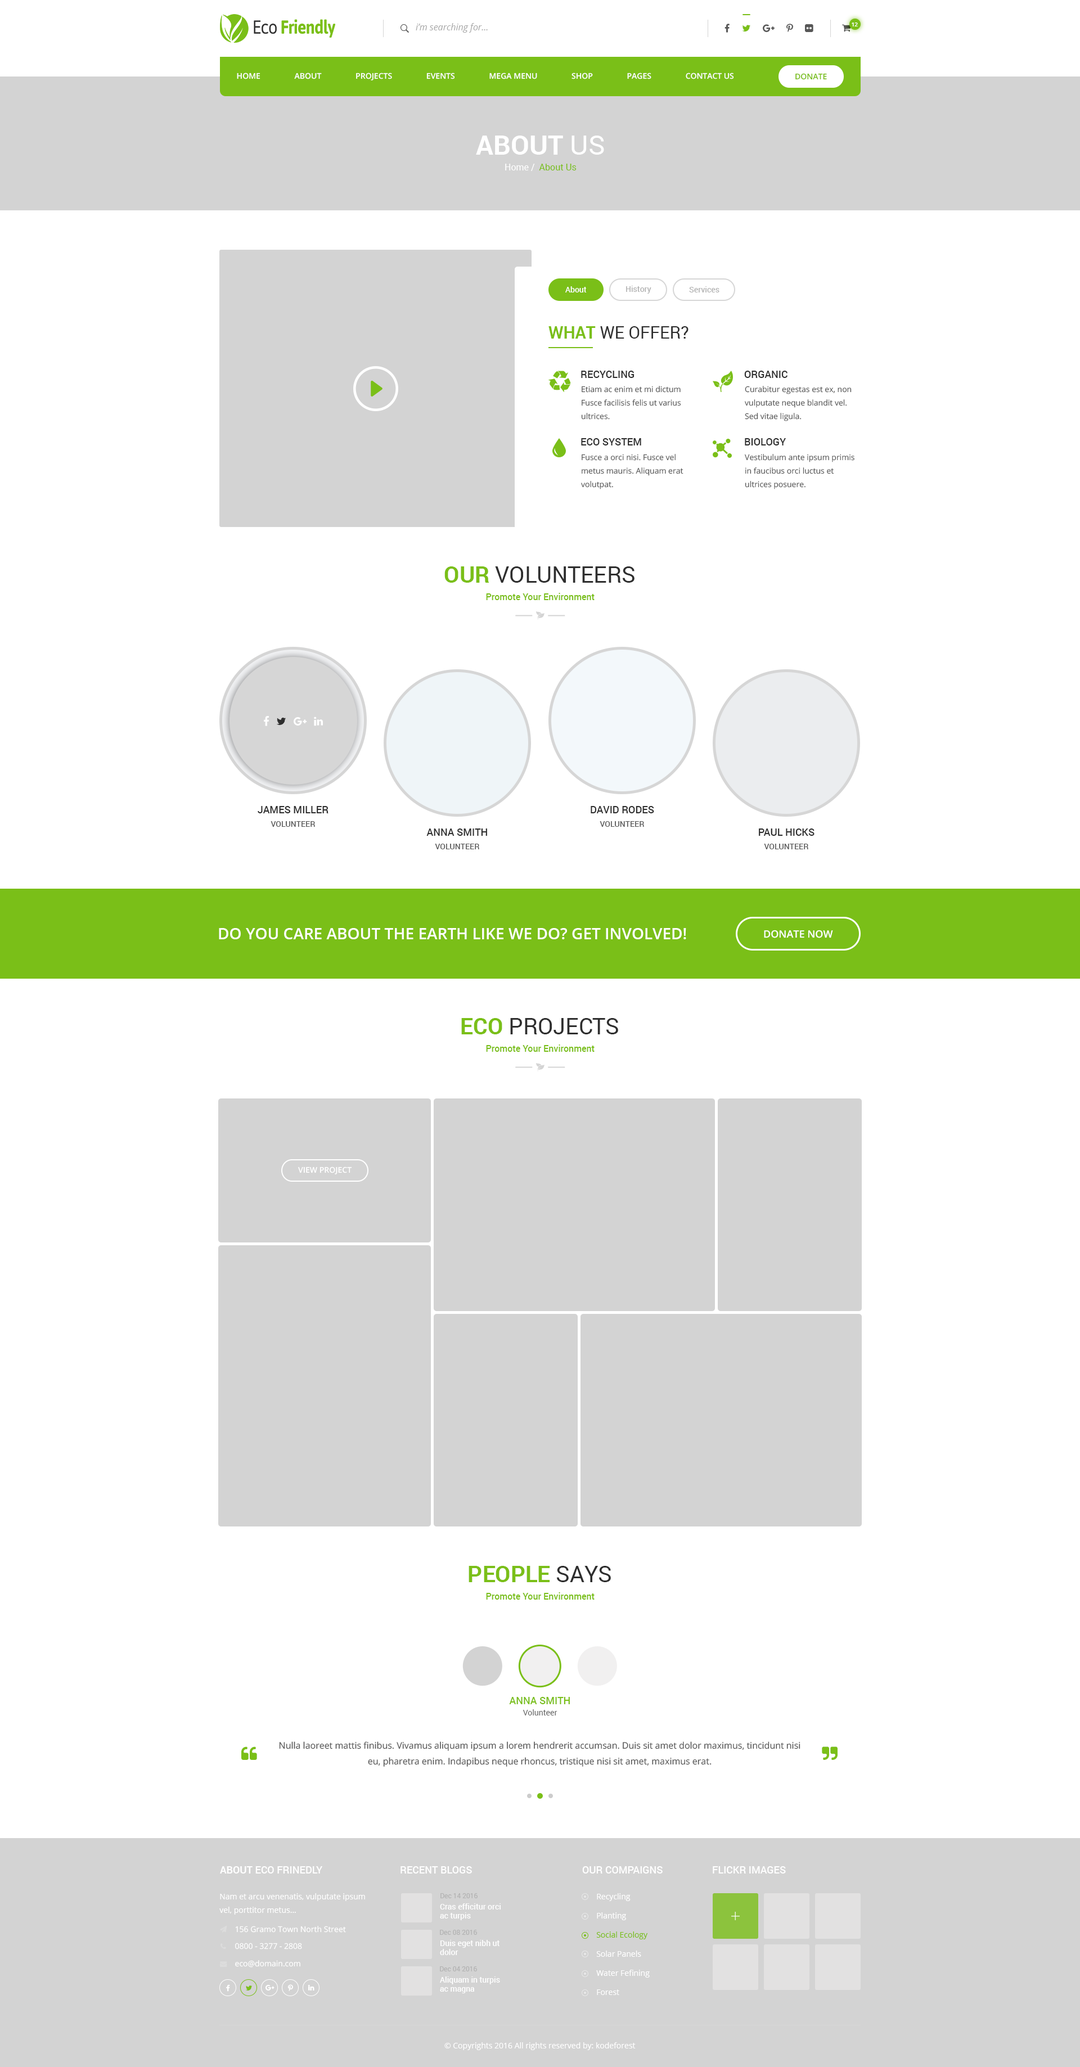
<style>
.page{position:relative;width:1080px;height:2067px;background:#ffffff}
.page>*{position:absolute;margin:0}
.t1{font:5.6px "OpenSans-Semibold";color:#ffffff}
.t2{font:7.9px "OpenSans-Semibold";color:#ffffff;text-transform:uppercase}
.t3{font:7.9px "OpenSans-Semibold";letter-spacing:-0.005em;color:#ffffff;text-transform:uppercase}
.t4{font:7.9px "OpenSans-Semibold";color:#7abf18;text-transform:uppercase}
.t5{font:9px/15.8px "Roboto-Regular";color:#7abf18}
.t6{font:27px "Roboto-Bold";color:#ffffff;text-transform:uppercase}
.t7{font:27px "Roboto-Regular";color:#ffffff;text-transform:uppercase}
.t8{font:9px/15.8px "Roboto-Regular";color:#ffffff}
.t9{font:7.9px "Roboto-Medium";color:#ffffff}
.t10{font:7.9px "Roboto-Medium";color:#b3b3b3}
.t11{font:16.9px "Roboto-Regular";color:#2e2e2e;text-transform:uppercase}
.t12{font:16.9px "Roboto-Bold";color:#7abf18;text-transform:uppercase}
.t13{font:10.1px "Roboto-Medium";color:#2e2e2e;text-transform:uppercase}
.t14{font:7.9px/13.5px "OpenSans";color:#575757}
.t15{font:22.5px "Roboto-Regular";color:#2e2e2e;text-transform:uppercase}
.t16{font:22.5px "Roboto-Bold";color:#7abf18;text-transform:uppercase}
.t17{font:9px "Roboto-Medium";color:#7abf18}
.t18{font:10.1px/13.5px "Roboto-Medium";color:#2e2e2e;text-transform:uppercase}
.t19{font:7.9px/13.5px "Roboto-Medium";color:#575757;text-transform:uppercase}
.t20{font:15.8px "OpenSans-Semibold";color:#ffffff;text-transform:uppercase}
.t21{font:10.1px "OpenSans-Semibold";color:#ffffff;text-transform:uppercase}
.t22{font:10.1px/13.5px "Roboto-Medium";color:#7abf18;text-transform:uppercase}
.t23{font:7.9px/11.2px "Roboto-Regular";color:#636363}
.t24{font:9px/15.7px "OpenSans";color:#575757}
.t25{font:10.1px "Roboto-Medium";color:#ffffff;text-transform:uppercase}
.t26{font:10.1px "Roboto-Bold";color:#ffffff;text-transform:uppercase}
.t27{font:7.9px/13.5px "OpenSans";color:#ffffff}
.t28{font:6.8px "Roboto-Regular";color:#b2b2b2}
.t29{font:7.9px/19.1px "OpenSans";color:#ffffff}
.t30{font:7.9px/19.1px "OpenSans";color:#7abf18}
.t31{font:7.9px "OpenSans";color:#ffffff}
.t32{font:7.8px "OpenSans";color:#ffffff}
</style>
<div class="page">
<p class="t1" style="left:852px;top:22px;width:6px;height:4px">12</p>
<p class="t2" style="left:237px;top:73px;width:497px;height:7px">Home                 About                 projects                 Events                 mega menu                 shop                 Pages<span class="t3">                 contact Us</span></p>
<p class="t4" style="left:795px;top:73px;width:32px;height:7px">donate</p>
<p class="t5" style="left:476px;top:136px;width:128px;height:35px;text-align:center"><span class="t6">about</span><span class="t7"> us<br></span><span class="t8">Home /</span>  About Us</p>
<p class="t9" style="left:565px;top:286px;width:22px;height:6px">About</p>
<p class="t10" style="left:626px;top:286px;width:25px;height:8px">History</p>
<p class="t10" style="left:689px;top:286px;width:30px;height:6px">Services</p>
<p class="t11" style="left:548px;top:326px;width:140px;height:13px"><span class="t12">what </span>we offer?</p>
<p class="t13" style="left:581px;top:371px;width:53px;height:7px">recycling</p>
<p class="t13" style="left:744px;top:371px;width:44px;height:7px">organic</p>
<p class="t14" style="left:581px;top:386px;width:100px;height:34px">Etiam ac enim et mi dictum Fusce facilisis felis ut varius ultrices.</p>
<p class="t14" style="left:745px;top:386px;width:107px;height:35px">Curabitur egestas est ex, non vulputate neque blandit vel. Sed vitae ligula.</p>
<p class="t13" style="left:581px;top:438px;width:60px;height:8px">eco system</p>
<p class="t13" style="left:745px;top:438px;width:41px;height:8px">biology</p>
<p class="t14" style="left:581px;top:454px;width:102px;height:35px">Fusce a orci nisi. Fusce vel metus mauris. Aliquam erat volutpat.</p>
<p class="t14" style="left:745px;top:454px;width:109px;height:35px">Vestibulum ante ipsum primis in faucibus orci luctus et ultrices posuere.</p>
<p class="t15" style="left:444px;top:566px;width:190px;height:17px"><span class="t16">our </span>volunteers</p>
<p class="t17" style="left:486px;top:593px;width:109px;height:7px">Promote Your Environment</p>
<p class="t18" style="left:258px;top:806px;width:70px;height:21px;text-align:center">James Miller<br><span class="t19">volunteer</span></p>
<p class="t18" style="left:591px;top:806px;width:63px;height:21px;text-align:center">david rodes<br><span class="t19">volunteer</span></p>
<p class="t18" style="left:426px;top:829px;width:61px;height:20px;text-align:center">anna smith<br><span class="t19">volunteer</span></p>
<p class="t18" style="left:759px;top:829px;width:55px;height:20px;text-align:center">paul hicks<br><span class="t19">volunteer</span></p>
<p class="t20" style="left:219px;top:928px;width:467px;height:11px">Do you care about the Earth like we do? Get involved!</p>
<p class="t21" style="left:764px;top:930px;width:69px;height:8px">donate now</p>
<p class="t15" style="left:461px;top:1018px;width:157px;height:16px"><span class="t16">eco </span>projects</p>
<p class="t17" style="left:486px;top:1045px;width:109px;height:7px">Promote Your Environment</p>
<p class="t2" style="left:298px;top:1167px;width:54px;height:7px">view project</p>
<p class="t16" style="left:469px;top:1566px;width:142px;height:16px">people <span class="t15">says</span></p>
<p class="t17" style="left:486px;top:1592px;width:109px;height:8px">Promote Your Environment</p>
<p class="t22" style="left:509px;top:1697px;width:61px;height:19px;text-align:center">anna smith<br><span class="t23">Volunteer</span></p>
<p class="t24" style="left:279px;top:1742px;width:521px;height:25px;text-align:center">Nulla laoreet mattis finibus. Vivamus aliquam ipsum a lorem hendrerit accumsan. Duis sit amet dolor maximus, tincidunt nisi eu, pharetra enim. Indapibus neque rhoncus, tristique nisi sit amet, maximus erat.</p>
<p class="t25" style="left:220px;top:1866px;width:102px;height:8px"><span class="t26">About </span>Eco frinedly</p>
<p class="t25" style="left:400px;top:1866px;width:72px;height:8px">recent blogs</p>
<p class="t25" style="left:582px;top:1866px;width:81px;height:8px">our compaigns</p>
<p class="t25" style="left:713px;top:1866px;width:73px;height:8px">flickr images</p>
<p class="t27" style="left:219px;top:1893px;width:146px;height:22px">Nam et arcu venenatis, vulputate ipsum vel, porttitor metus...</p>
<p class="t28" style="left:440px;top:1893px;width:38px;height:5px">Dec 14 2016</p>
<p class="t29" style="left:596px;top:1893px;width:54px;height:102px">Recycling<br>Planting<br><span class="t30">Social Ecology<br></span>Solar Panels<br>Water Fefining<br>Forest</p>
<p class="t9" style="left:440px;top:1904px;width:61px;height:16px">Cras efficitur orci<br>ac turpis</p>
<p class="t31" style="left:235px;top:1926px;width:111px;height:7px">156 Gramo Town North Street</p>
<p class="t28" style="left:440px;top:1930px;width:37px;height:5px">Dec 08 2016</p>
<p class="t32" style="left:235px;top:1943px;width:67px;height:7px">0800 - 3277 - 2808</p>
<p class="t9" style="left:440px;top:1940px;width:60px;height:15px">Duis eget nibh ut<br>dolor</p>
<p class="t32" style="left:235px;top:1960px;width:65px;height:8px">eco@domain.com</p>
<p class="t28" style="left:440px;top:1966px;width:37px;height:6px">Dec 04 2016</p>
<p class="t9" style="left:440px;top:1977px;width:60px;height:17px">Aliquam in turpis<br>ac magna</p>
<p class="t31" style="left:444px;top:2042px;width:192px;height:8px">© Copyrights 2016 All rights reserved by: kodeforest</p>
</div>
